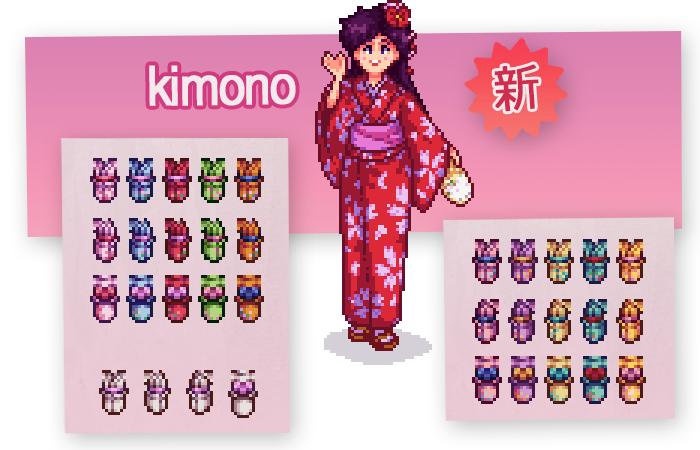
<style>
.page{position:relative;width:700px;height:450px}
.page>*{position:absolute;margin:0}
.t1{font:54px "Helvetica-Normal";letter-spacing:-0.06em;color:#f5e9ee;font-weight:bold;scale:0.9 1}
.t2{font:50px "Meiryo";letter-spacing:-0.05em;color:#cf2d4b;font-weight:bold;scale:0.9 1}
</style>
<div class="page">
<p class="t1" style="left:149px;top:65px;width:147px;height:41px;rotate:-1deg">kimono</p>
<p class="t2" style="left:494px;top:64px;width:45px;height:48px;rotate:-4deg">新</p>
</div>
